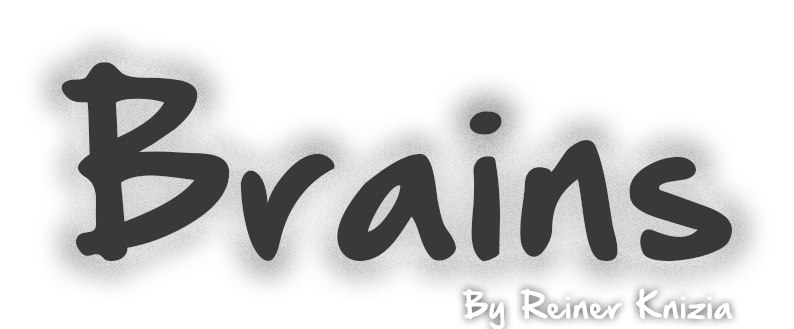
<style>
.page{position:relative;width:794px;height:329px;background:#ffffff}
.page>*{position:absolute;margin:0}
.t1{font:200px "HandOfSeanDemo";color:#393939}
.t2{font:30px "HandOfSeanDemo";color:#ffffff}
</style>
<div class="page">
<p class="t1" style="left:61px;top:62px;width:671px;height:199px">Brains</p>
<p class="t2" style="left:462px;top:288px;width:271px;height:42px">By Reiner Knizia</p>
</div>
